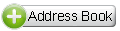
<style>
.page{position:relative;width:120px;height:31px;background:#ffffff}
.page>*{position:absolute;margin:0}
.t1{font:14px "ArialMT";letter-spacing:-0.025em;color:#000000}
</style>
<div class="page">
<p class="t1" style="left:28px;top:9px;width:84px;height:17px">Address Book</p>
</div>
